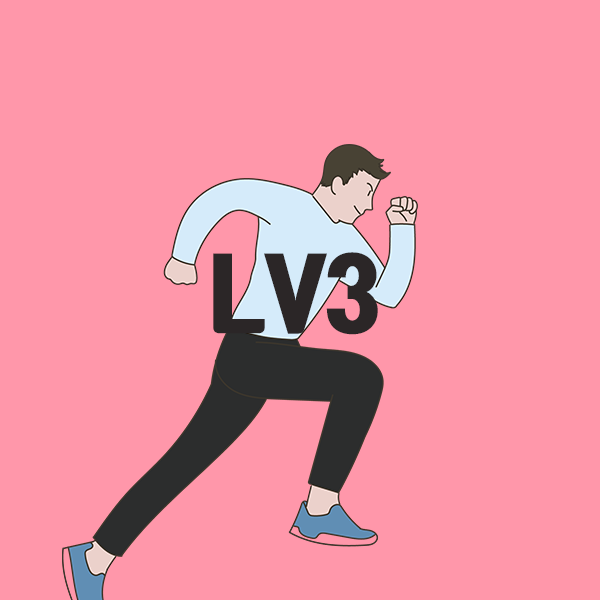
<style>
.page{position:relative;width:600px;height:600px;background:#ff97aa}
.page>*{position:absolute;margin:0}
.t1{font:92.2px "TmonMonsoriBlack";color:#2b2627}
</style>
<div class="page">
<p class="t1" style="left:213px;top:252px;width:165px;height:83px">LV3</p>
</div>
